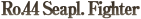
<style>
.page{position:relative;width:141px;height:19px;background:#ffffff}
.page>*{position:absolute;margin:0}
.t1{font:18px "RyuminPro-ExBold";letter-spacing:-0.08em;color:#4a3f32;font-weight:bold;scale:0.9 1}
</style>
<div class="page">
<p class="t1" style="left:1px;top:1px;width:139px;height:18px">Ro.44 Seapl. Fighter</p>
</div>
